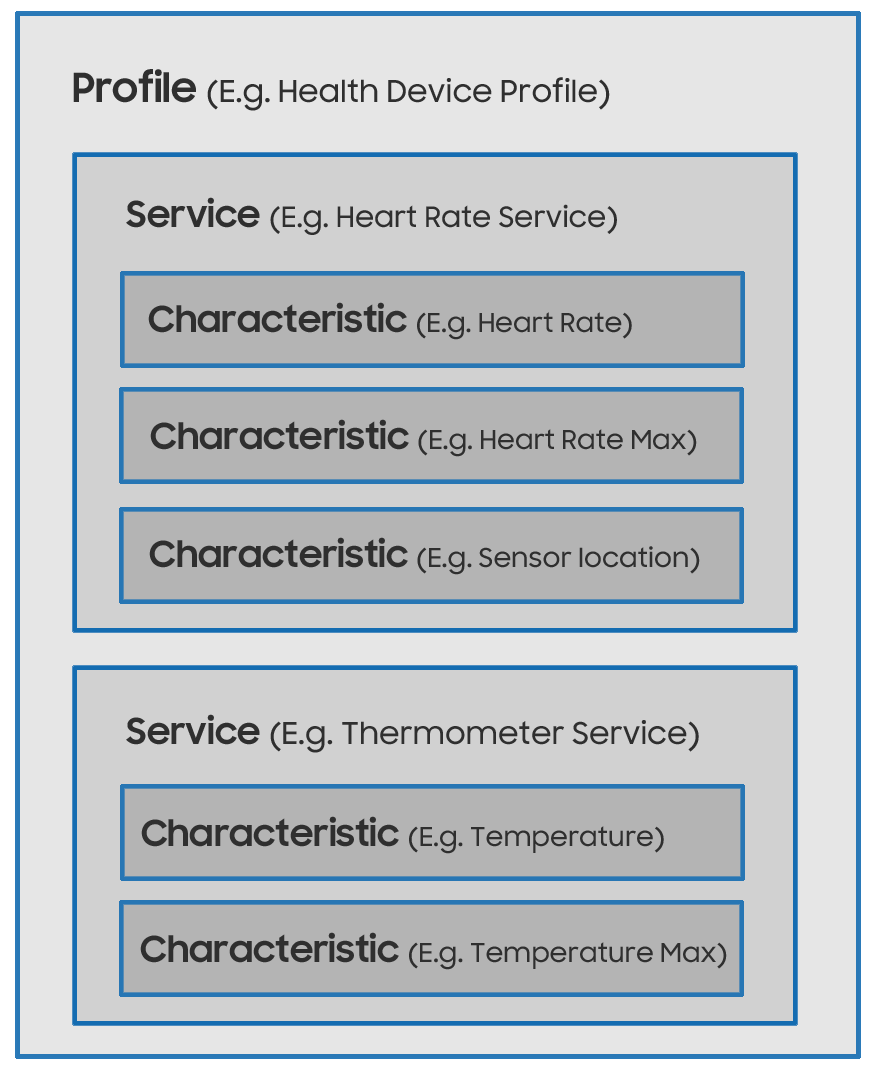
<style>
.page{position:relative;width:875px;height:1081px;background:#e6e6e6}
.page>*{position:absolute;margin:0}
.t1{font:30px "SamsungSharpSans-Medium";color:#2f2f2f}
.t2{font:40px "SamsungSharpSans-Bold";color:#2f2f2f}
.t3{font:28px "SamsungSharpSans-Medium";color:#2f2f2f}
.t4{font:36px "SamsungSharpSans-Bold";color:#2f2f2f}
.t5{font:26px "SamsungSharpSans-Medium";color:#2f2f2f}
</style>
<div class="page">
<p class="t1" style="left:73px;top:69px;width:537px;height:42px"><span class="t2">Profile </span>(E.g. Health Device Profile)</p>
<p class="t3" style="left:126px;top:197px;width:491px;height:38px"><span class="t4">Service </span>(E.g. Heart Rate Service)</p>
<p class="t5" style="left:148px;top:302px;width:484px;height:38px"><span class="t4">Characteristic </span>(E.g. Heart Rate)</p>
<p class="t5" style="left:150px;top:419px;width:547px;height:38px"><span class="t4">Characteristic </span>(E.g. Heart Rate Max)</p>
<p class="t5" style="left:149px;top:537px;width:551px;height:38px"><span class="t4">Characteristic </span>(E.g. Sensor location)</p>
<p class="t1" style="left:126px;top:714px;width:573px;height:39px"><span class="t4">Service </span>(E.g. Thermometer Service)</p>
<p class="t5" style="left:141px;top:816px;width:523px;height:38px"><span class="t4">Characteristic </span>(E.g. Temperature)</p>
<p class="t5" style="left:140px;top:932px;width:587px;height:38px"><span class="t4">Characteristic </span>(E.g. Temperature Max)</p>
</div>
